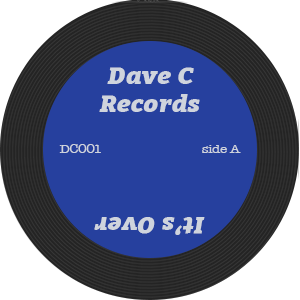
<style>
.page{position:relative;width:300px;height:300px;background:#26409e}
.page>*{position:absolute;margin:0}
.t1{font:23.1px "Bitter-BlackItalic";letter-spacing:-0.025em;color:#cfd4dd;scale:1.1 1}
.t2{font:12.5px "AmericanTypewriter";letter-spacing:-0.025em;color:#cfd4dd;scale:1.1 1}
</style>
<div class="page">
<p class="t1" style="left:99px;top:67px;width:101px;height:45px;text-align:center">Dave C<br>Records</p>
<p class="t2" style="left:59px;top:144px;width:42px;height:9px">DC001</p>
<p class="t2" style="left:202px;top:145px;width:39px;height:8px">side A</p>
<p class="t1" style="left:94px;top:217px;width:111px;height:18px;rotate:180deg">It’s Over</p>
</div>
